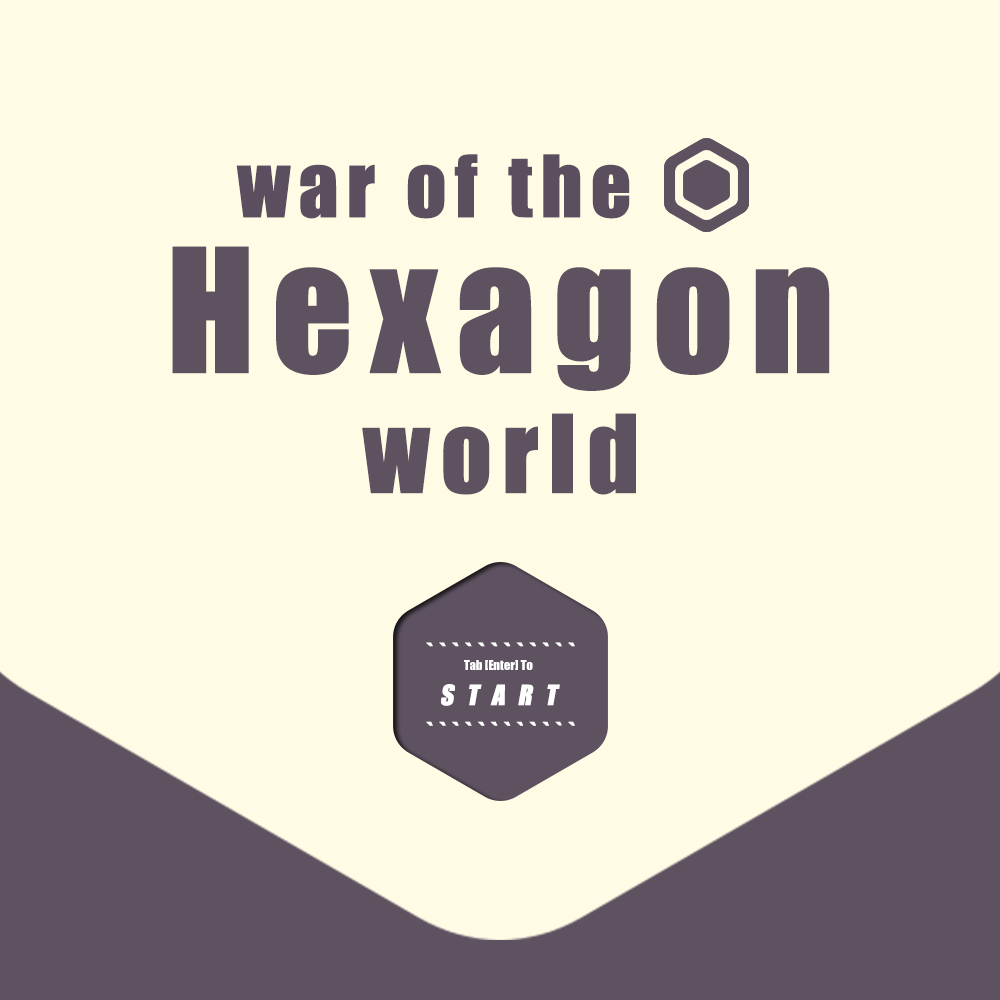
<style>
.page{position:relative;width:1000px;height:1000px;background:#fffbe5}
.page>*{position:absolute;margin:0}
.t1{font:79px/84px "Impact";letter-spacing:0.08em;color:#5b4f5f;font-weight:bold}
.t2{font:159px/173px "Impact";letter-spacing:0.08em;color:#5e5261;font-weight:bold}
.t3{font:100px/137px "Impact";letter-spacing:0.08em;color:#5e5261;font-weight:bold}
.t4{font:12.6px/23.3px "Impact";color:#ffffff}
.t5{font:25.8px/16.9px "Impact";letter-spacing:0.14em;color:#ffffff;font-weight:bold;font-style:italic}
.t6{font:25.8px/39.1px "Impact";letter-spacing:0.14em;color:#ffffff;font-weight:bold;font-style:italic}
.t7{font:25.8px/51.2px "Impact";letter-spacing:0.14em;color:#ffffff;font-weight:bold;font-style:italic}
</style>
<div class="page">
<p class="t1" style="left:172px;top:154px;width:658px;height:341px;text-align:center">war of the      <br><span class="t2">Hexagon<br></span><span class="t3">world</span></p>
<p class="t4" style="left:426px;top:642px;width:149px;height:84px;text-align:center"><span class="t5">````````````<br></span>Tab [Enter] To<br><span class="t6">S T A R T<br></span><span class="t7">````````````</span></p>
</div>
